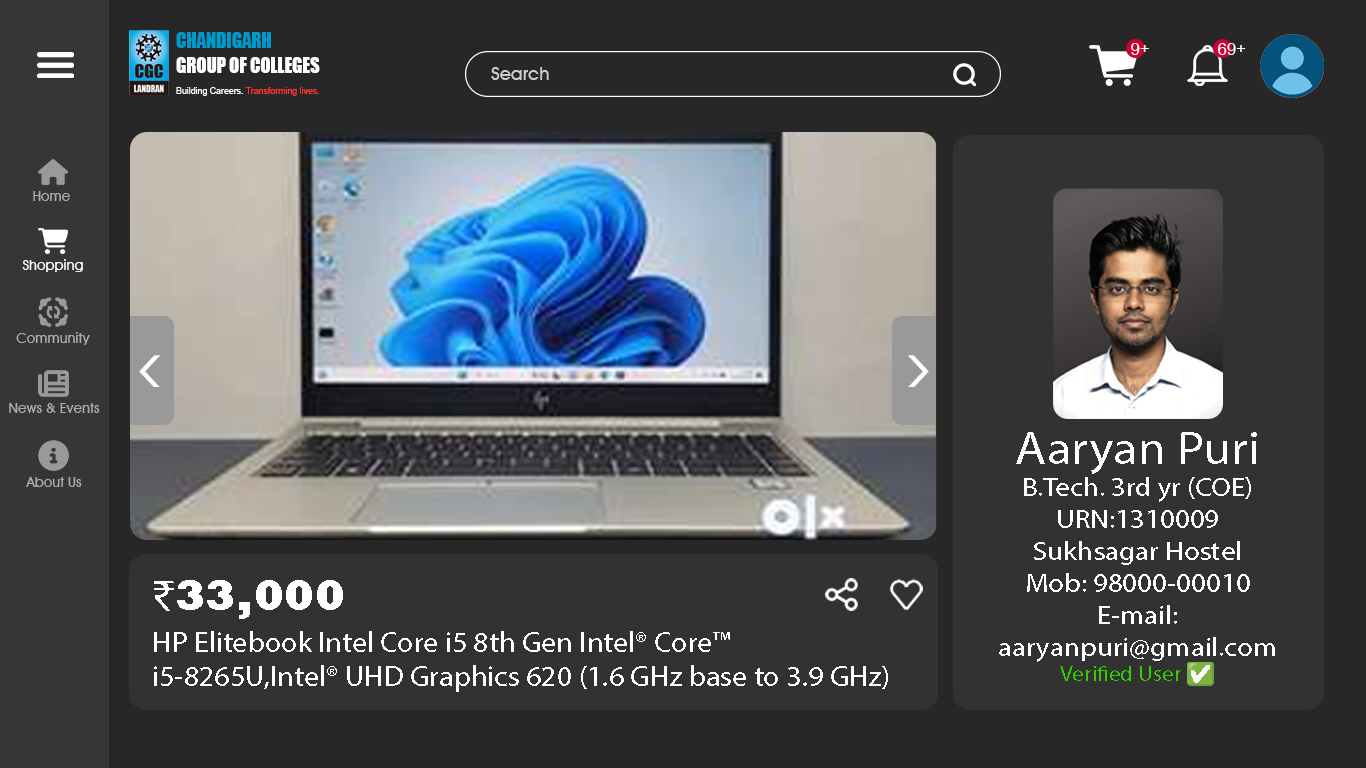
<style>
.page{position:relative;width:1366px;height:768px;background:#272727}
.page>*{position:absolute;margin:0}
.t1{font:20.2px "Impact";color:#ffffff;scale:0.92 1}
.t2{font:20.2px "Impact";color:#0099cc;scale:0.92 1}
.t3{font:16.6px "ArialMT";color:#ffffff}
.t4{font:18.4px "AvantGardeITCbyBT-Medium";color:#cccccc}
.t5{font:9.6px "ArialMT";color:#ff3333;scale:0.92 1}
.t6{font:9.6px "ArialMT";color:#ffffff;scale:0.92 1}
.t7{font:14px "AvantGardeITCbyBT-Medium";color:#acacac}
.t8{font:14px "AvantGardeITCbyBT-Medium";color:#ffffff}
.t9{font:26.6px "MyriadPro-Regular";color:#ffffff;scale:1.09 1}
.t10{font:46.8px "MyriadPro-Regular";color:#ffffff;scale:1.09 1}
.t11{font:21.1px "MyriadPro-Regular";color:#33cc00;scale:1.09 1}
.t12{font:21.1px "NotoColorEmoji-SVG";color:#ffffff;scale:1.09 1}
.t13{font:44.5px "Rockwell-ExtraBold";color:#ffffff}
.t14{font:44.5px "MyriadPro-Regular";color:#ffffff}
.t15{font:28.5px "MyriadPro-Regular";color:#ffffff;scale:1.05 1}
</style>
<div class="page">
<p class="t1" style="left:176px;top:32px;width:144px;height:41px"><span class="t2">CHANDIGARH<br></span>GROUP OF COLLEGES</p>
<p class="t3" style="left:1131px;top:43px;width:18px;height:12px">9+</p>
<p class="t3" style="left:1218px;top:43px;width:28px;height:12px">69+</p>
<p class="t4" style="left:491px;top:67px;width:58px;height:13px">Search</p>
<p class="t5" style="left:176px;top:87px;width:144px;height:9px"><span class="t6">Building Careers. </span>Transforming lives.</p>
<p class="t7" style="left:33px;top:191px;width:37px;height:10px">Home</p>
<p class="t8" style="left:22px;top:259px;width:61px;height:13px">Shopping</p>
<p class="t7" style="left:16px;top:332px;width:74px;height:13px">Community</p>
<p class="t7" style="left:9px;top:403px;width:91px;height:10px">News &amp; Events</p>
<p class="t9" style="left:999px;top:432px;width:276px;height:254px;text-align:center"><span class="t10">Aaryan Puri<br></span>B.Tech. 3rd yr (COE)<br>URN:1310009<br>Sukhsagar Hostel<br>Mob: 98000-00010<br>E-mail: aaryanpuri@gmail.com<br><span class="t11">Verified User </span><span class="t12">✅</span></p>
<p class="t7" style="left:26px;top:477px;width:56px;height:10px">About Us</p>
<p class="t13" style="left:154px;top:580px;width:189px;height:39px"><span class="t14">₹</span>33,000</p>
<p class="t15" style="left:154px;top:631px;width:734px;height:61px">HP Elitebook Intel Core i5 8th Gen Intel® Core™ i5-8265U,Intel® UHD Graphics 620 (1.6 GHz base to 3.9 GHz)</p>
</div>
